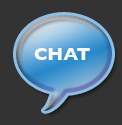
<style>
.page{position:relative;width:122px;height:125px;background:#333333}
.page>*{position:absolute;margin:0}
.t1{font:18px "GillSans-Bold";color:#fcfbfb}
</style>
<div class="page">
<p class="t1" style="left:34px;top:48px;width:56px;height:12px">CHAT</p>
</div>
